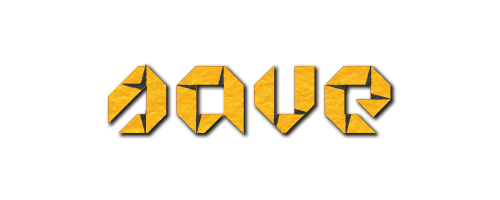
<style>
.page{position:relative;width:500px;height:200px;background:#ffffff}
.page>*{position:absolute;margin:0}
.t1{font:133.3px "Origram";color:#f6b01d}
.t2{font:133.3px "OrigramPro-Shadows";color:#353434}
.t3{font:133.3px "OrigramPro-Shadows";color:#343333}
</style>
<div class="page">
<p class="t1" style="left:108px;top:65px;width:283px;height:69px">save</p>
<p class="t2" style="left:176px;top:66px;width:48px;height:67px">a</p>
<p class="t3" style="left:273px;top:108px;width:34px;height:19px">v</p>
</div>
